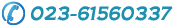
<style>
.page{position:relative;width:178px;height:26px;background:#ffffff}
.page>*{position:absolute;margin:0}
.t1{font:18px "Biondi";letter-spacing:0.1em;color:#1d90b1;font-style:italic;scale:0.9 1}
</style>
<div class="page">
<p class="t1" style="left:31px;top:6px;width:142px;height:15px">023-61560337</p>
</div>
